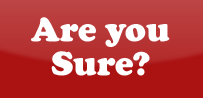
<style>
.page{position:relative;width:203px;height:98px;background:#ab1313}
.page>*{position:absolute;margin:0}
.t1{font:34.7px/34.7px "CooperBlack";color:#ffffff}
</style>
<div class="page">
<p class="t1" style="left:31px;top:17px;width:139px;height:59px;text-align:center">Are you Sure?</p>
</div>
